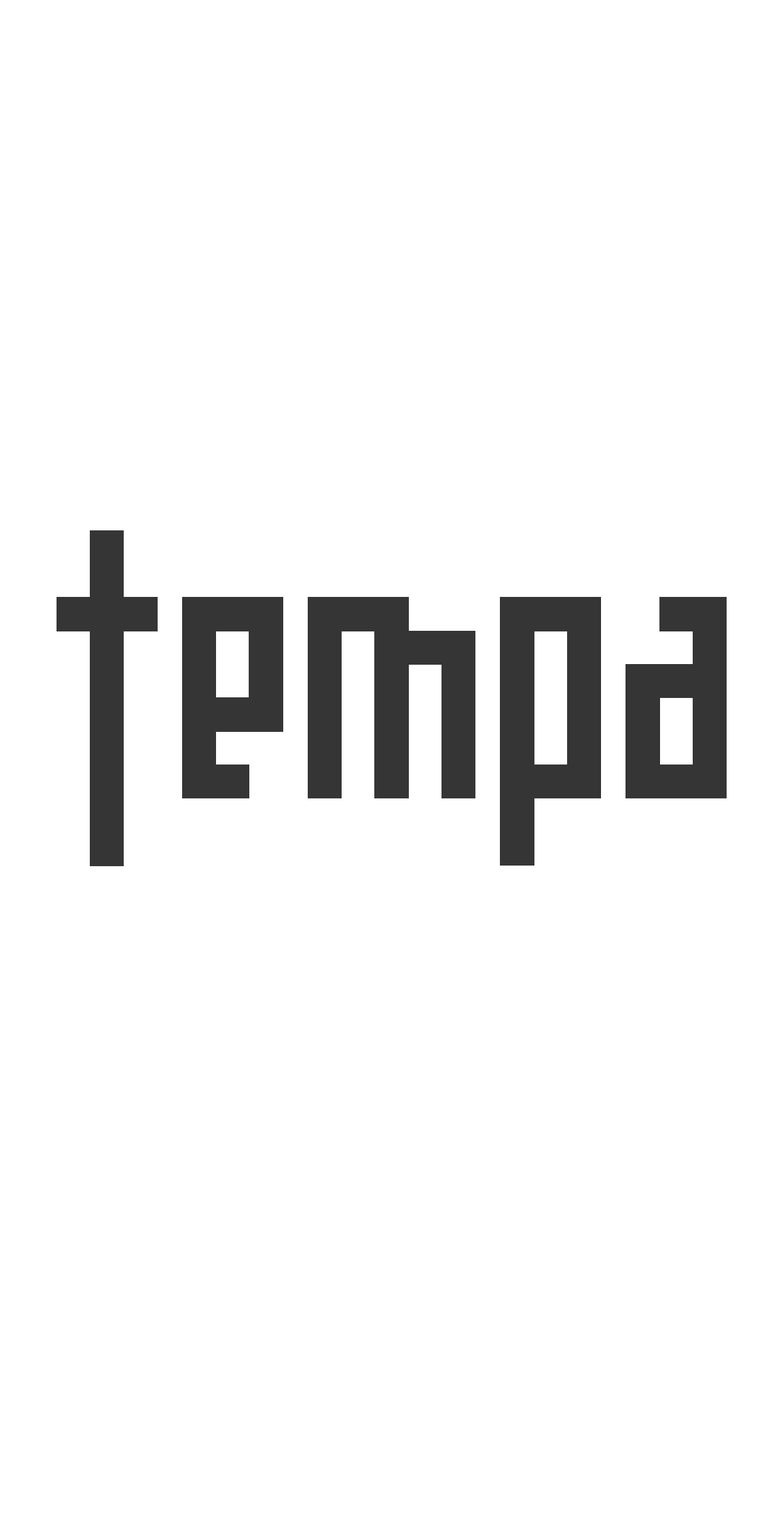
<style>
.page{position:relative;width:780px;height:1529px;background:#ffffff}
.page>*{position:absolute;margin:0}
.t1{font:313.9px "Teknobe";color:#353535}
</style>
<div class="page">
<p class="t1" style="left:57px;top:530px;width:669px;height:336px">Tempa</p>
</div>
